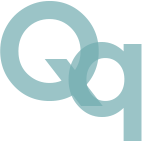
<style>
.page{position:relative;width:142px;height:142px;background:#ffffff}
.page>*{position:absolute;margin:0}
.t1{font:134.4px "CenturyGothic-Bold";color:#9bc4c7}
</style>
<div class="page">
<p class="t1" style="left:0px;top:1px;width:103px;height:105px">Q</p>
<p class="t1" style="left:68px;top:42px;width:74px;height:99px">q</p>
</div>
